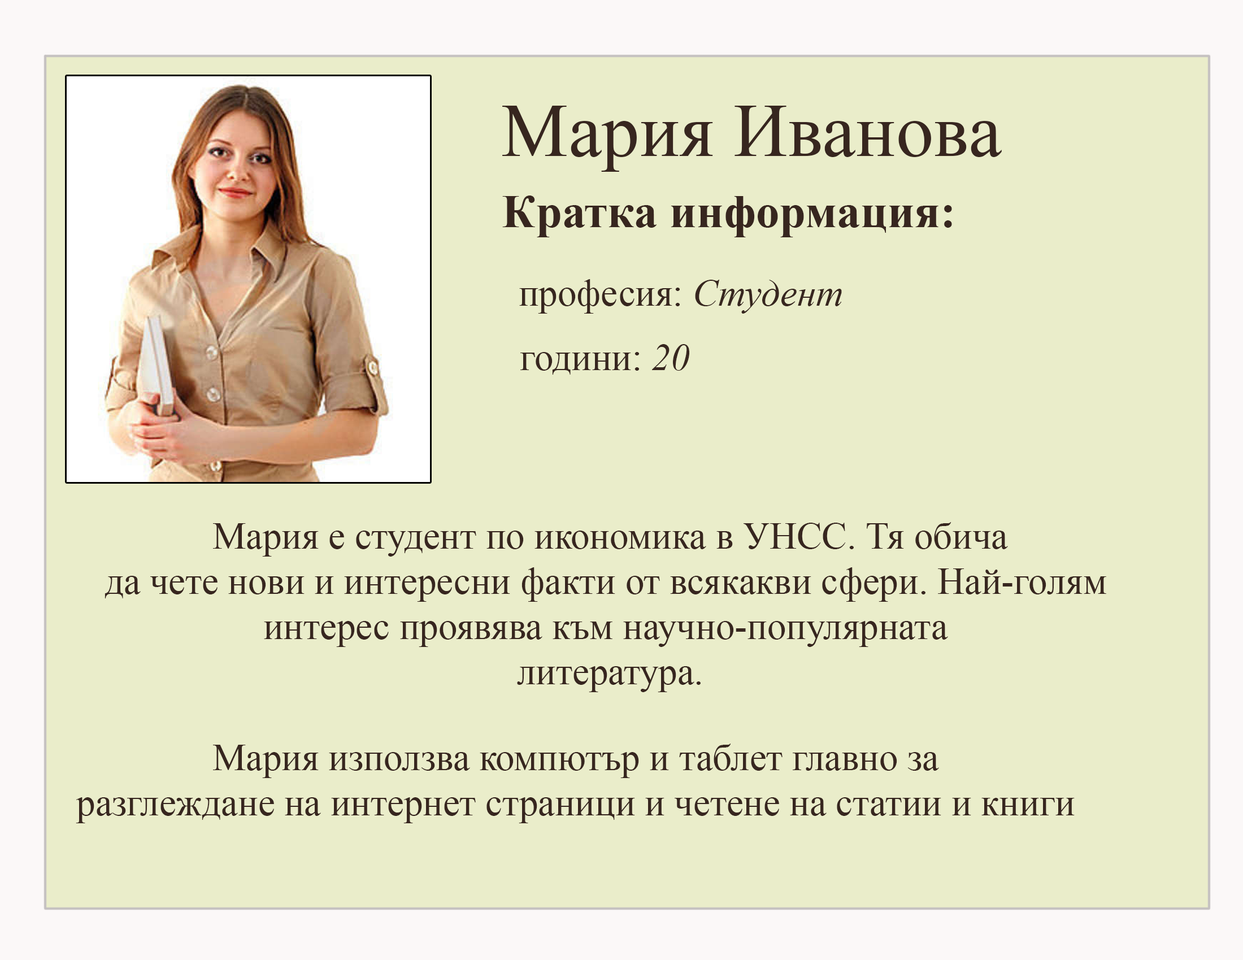
<style>
.page{position:relative;width:1243px;height:960px;background:#eaedca}
.page>*{position:absolute;margin:0}
.t1{font:75.3px "TimesNewRomanPSMT";color:#37261f}
.t2{font:47.1px "TimesNewRomanPS-BoldMT";color:#37261f}
.t3{font:37.7px "TimesNewRomanPSMT";color:#37261f}
.t4{font:37.7px "TimesNewRomanPS-ItalicMT";color:#37261f}
</style>
<div class="page">
<p class="t1" style="left:502px;top:106px;width:499px;height:66px">Мария Иванова</p>
<p class="t2" style="left:502px;top:195px;width:450px;height:42px">Кратка информация:</p>
<p class="t3" style="left:519px;top:279px;width:323px;height:34px">професия: <span class="t4">Студент</span></p>
<p class="t3" style="left:520px;top:344px;width:169px;height:30px">години: <span class="t4">20</span></p>
<p class="t3" style="left:104px;top:522px;width:1002px;height:170px;text-align:center">Мария е студент по икономика в УНСС. Тя обича<br>да чете нови и интересни факти от всякакви сфери. Най-голям <br>интерес проявява към научно-популярната <br>литература.</p>
<p class="t3" style="left:76px;top:743px;width:998px;height:80px;text-align:center">Мария използва компютър и таблет главно за<br>разглеждане на интернет страници и четене на статии и книги</p>
</div>
